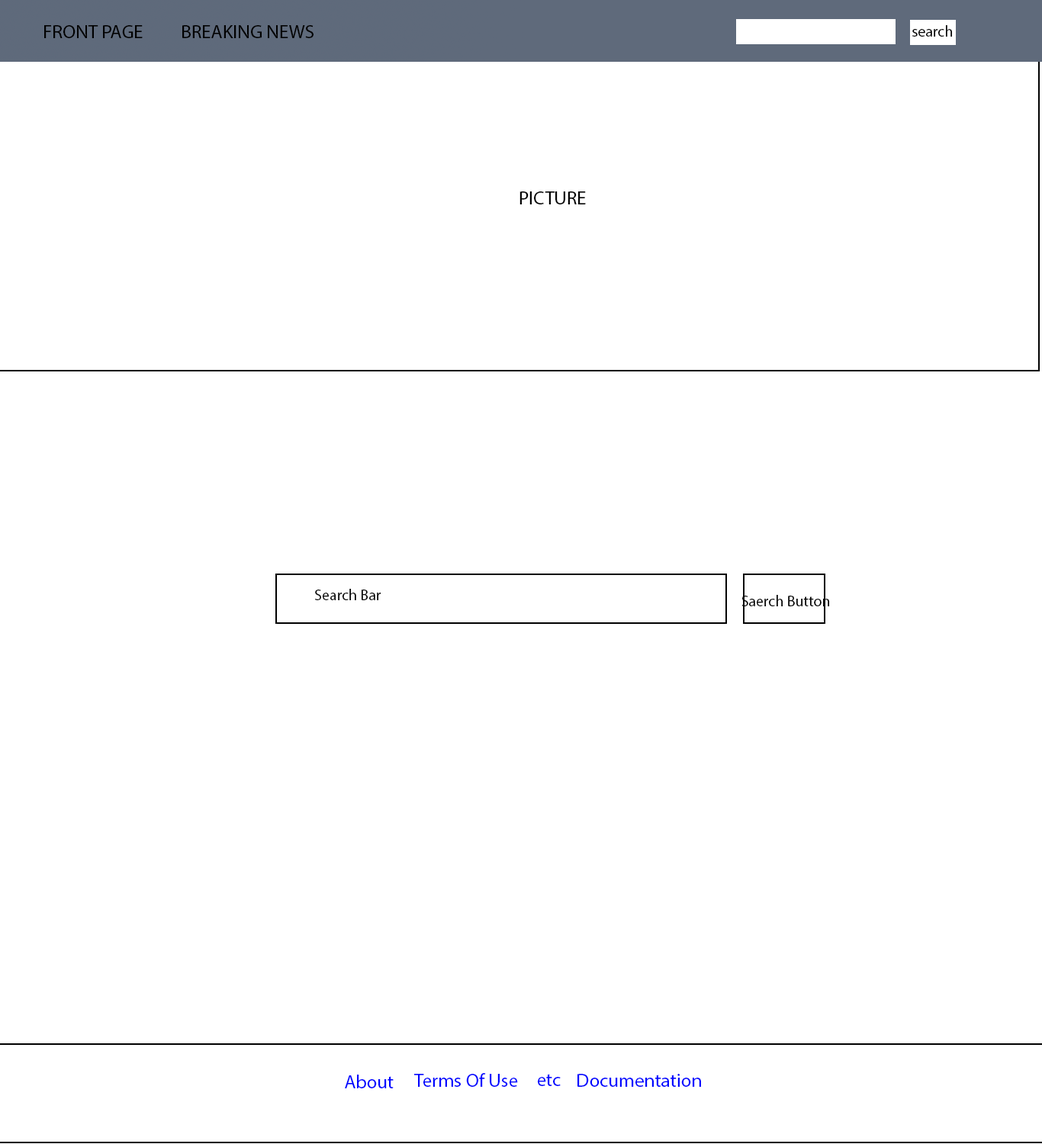
<style>
.page{position:relative;width:1042px;height:1144px;background:#ffffff}
.page>*{position:absolute;margin:0}
.t1{font:19.1px "MyriadPro-Regular";color:#000000}
.t2{font:15.3px "MyriadPro-Regular";color:#000000}
.t3{font:19.1px "MyriadPro-Regular";color:#010101}
.t4{font:19.1px "MyriadPro-Regular";color:#0006ff}
</style>
<div class="page">
<p class="t1" style="left:44px;top:25px;width:99px;height:13px">FRONT PAGE</p>
<p class="t1" style="left:182px;top:25px;width:132px;height:13px">BREAKING NEWS</p>
<p class="t2" style="left:912px;top:25px;width:40px;height:12px">search</p>
<p class="t3" style="left:520px;top:191px;width:66px;height:13px">PICTURE</p>
<p class="t2" style="left:315px;top:589px;width:66px;height:11px">Search Bar</p>
<p class="t2" style="left:742px;top:595px;width:87px;height:11px">Saerch Button</p>
<p class="t4" style="left:414px;top:1073px;width:104px;height:14px">Terms Of Use</p>
<p class="t4" style="left:345px;top:1075px;width:49px;height:14px">About</p>
<p class="t4" style="left:538px;top:1074px;width:23px;height:12px">etc</p>
<p class="t4" style="left:577px;top:1074px;width:124px;height:13px">Documentation</p>
</div>
